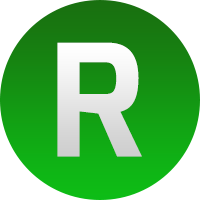
<style>
.page{position:relative;width:200px;height:200px;background:#ffffff}
.page>*{position:absolute;margin:0}
.t1{font:155.5px "Exo-Bold";color:#e8e8e8}
</style>
<div class="page">
<p class="t1" style="left:57px;top:42px;width:85px;height:115px">R</p>
</div>
